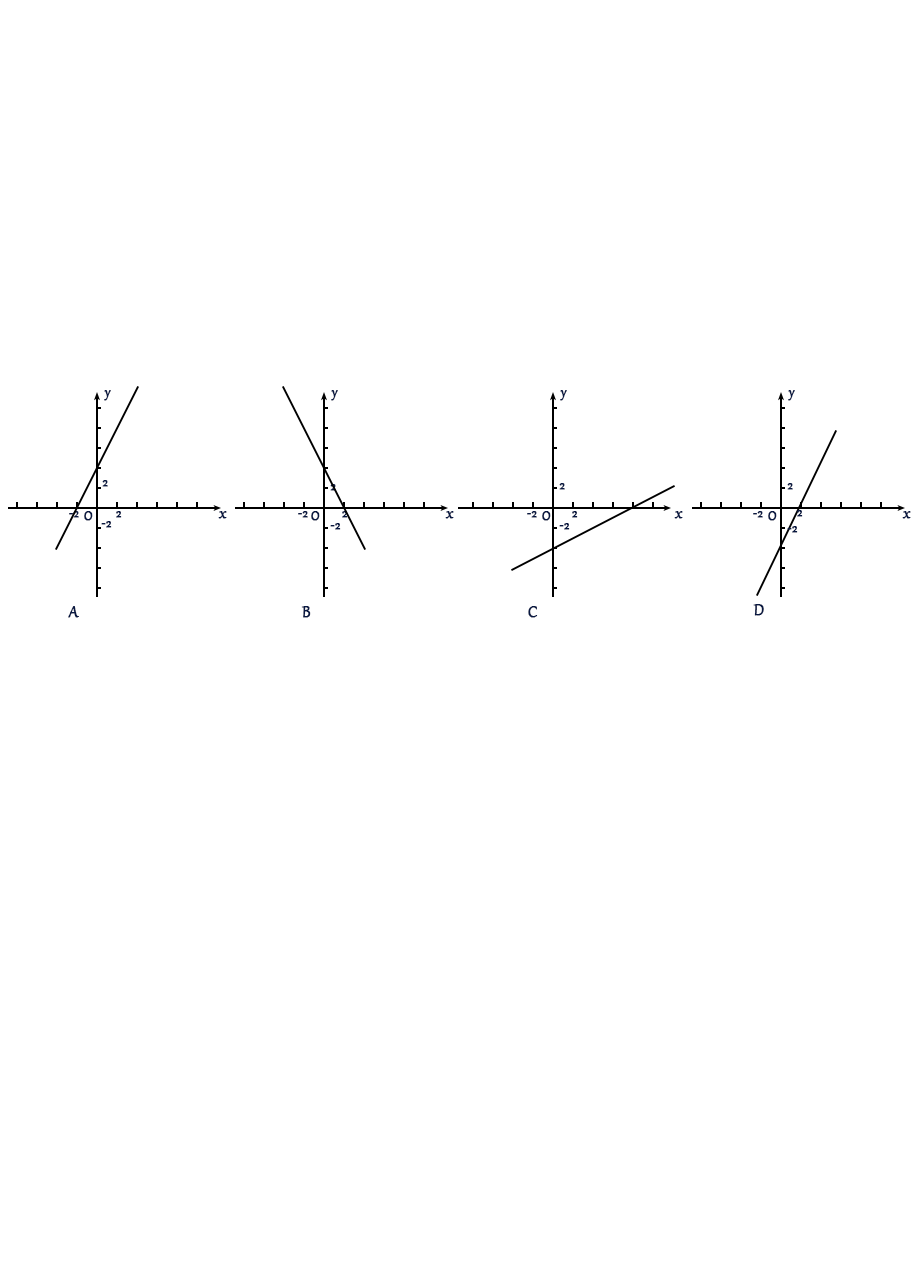
<style>
.page{position:relative;width:916px;height:1268px;background:#ffffff}
.page>*{position:absolute;margin:0}
.t1{font:16px "Gabriola";color:#081842;font-weight:bold}
.t2{font:12px "Gabriola";color:#081842;font-weight:bold}
.t3{font:12px "Gabriola";color:#05112e;font-weight:bold}
.t4{font:18.7px "Gabriola";color:#081842;font-weight:bold}
</style>
<div class="page">
<p class="t1" style="left:104px;top:390px;width:7px;height:11px">y</p>
<p class="t1" style="left:331px;top:390px;width:7px;height:11px">y</p>
<p class="t1" style="left:560px;top:390px;width:7px;height:11px">y</p>
<p class="t1" style="left:788px;top:390px;width:7px;height:11px">y</p>
<p class="t2" style="left:102px;top:480px;width:6px;height:7px">2</p>
<p class="t3" style="left:330px;top:484px;width:6px;height:7px">2</p>
<p class="t2" style="left:559px;top:483px;width:6px;height:7px">2</p>
<p class="t2" style="left:787px;top:483px;width:6px;height:7px">2</p>
<p class="t2" style="left:797px;top:510px;width:6px;height:7px">2</p>
<p class="t2" style="left:69px;top:511px;width:10px;height:7px">-2</p>
<p class="t1" style="left:84px;top:511px;width:9px;height:10px">O</p>
<p class="t2" style="left:101px;top:521px;width:11px;height:7px">-2</p>
<p class="t2" style="left:116px;top:511px;width:6px;height:7px">2</p>
<p class="t4" style="left:218px;top:511px;width:9px;height:8px">x</p>
<p class="t2" style="left:298px;top:511px;width:10px;height:7px">-2</p>
<p class="t1" style="left:311px;top:511px;width:9px;height:10px">O</p>
<p class="t2" style="left:342px;top:511px;width:6px;height:7px">2</p>
<p class="t4" style="left:445px;top:511px;width:9px;height:8px">x</p>
<p class="t2" style="left:527px;top:511px;width:10px;height:7px">-2</p>
<p class="t1" style="left:542px;top:511px;width:9px;height:10px">O</p>
<p class="t2" style="left:572px;top:511px;width:6px;height:7px">2</p>
<p class="t4" style="left:674px;top:511px;width:9px;height:8px">x</p>
<p class="t2" style="left:753px;top:511px;width:10px;height:7px">-2</p>
<p class="t1" style="left:768px;top:511px;width:9px;height:10px">O</p>
<p class="t4" style="left:902px;top:511px;width:9px;height:8px">x</p>
<p class="t2" style="left:330px;top:523px;width:11px;height:7px">-2</p>
<p class="t2" style="left:559px;top:523px;width:11px;height:7px">-2</p>
<p class="t2" style="left:787px;top:526px;width:11px;height:7px">-2</p>
<p class="t4" style="left:68px;top:606px;width:11px;height:12px">A</p>
<p class="t4" style="left:301px;top:606px;width:10px;height:12px">B</p>
<p class="t4" style="left:528px;top:606px;width:10px;height:12px">C</p>
<p class="t4" style="left:753px;top:604px;width:11px;height:12px">D</p>
</div>
